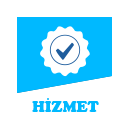
<style>
.page{position:relative;width:130px;height:128px;background:#ffffff}
.page>*{position:absolute;margin:0}
.t1{font:16px "CooperBlack";color:#00b9ff}
</style>
<div class="page">
<p class="t1" style="left:32px;top:101px;width:67px;height:11px">HIZMET</p>
</div>
